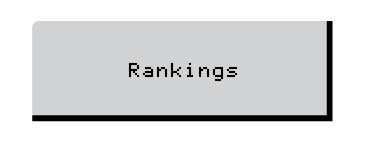
<style>
.page{position:relative;width:375px;height:142px;background:#d1d2d4}
.page>*{position:absolute;margin:0}
.t1{font:16px "Mono0756";color:#000000}
</style>
<div class="page">
<p class="t1" style="left:128px;top:62px;width:110px;height:20px">Rankings</p>
</div>
